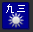
<style>
.page{position:relative;width:33px;height:32px;background:#000090}
.page>*{position:absolute;margin:0}
.t1{font:10.4px "SimSun";color:#ffffff}
</style>
<div class="page">
<p class="t1" style="left:6px;top:4px;width:19px;height:9px">九三</p>
</div>
